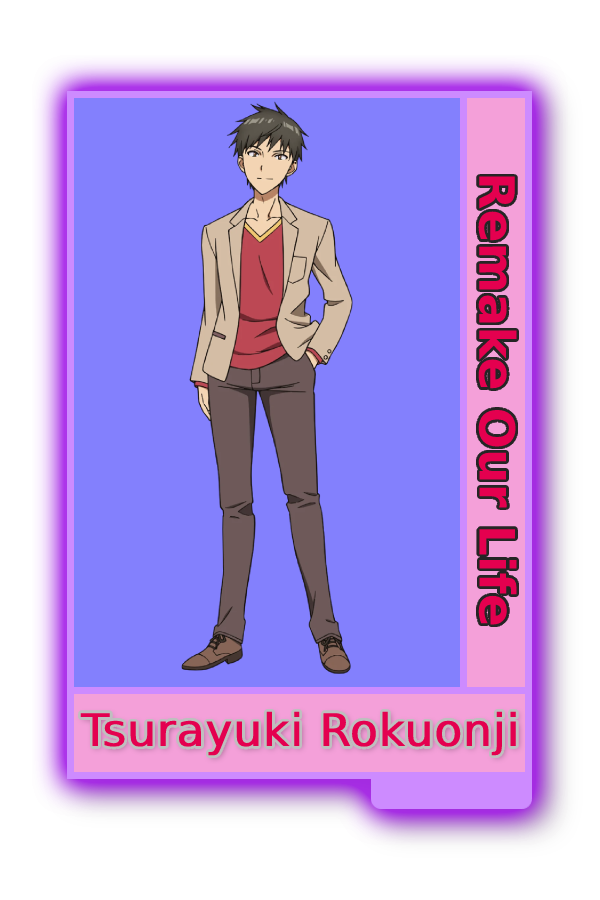
<style>
.page{position:relative;width:600px;height:900px;background:#8380fd}
.page>*{position:absolute;margin:0}
.t1{font:48.8px "MADETOMMY-Bold";color:#e4004f}
.t2{font:45px "CoolveticaRg-Regular";color:#e4004f;font-weight:bold}
</style>
<div class="page">
<p class="t1" style="left:478px;top:176px;width:39px;height:449px;rotate:90deg">Remake Our Life</p>
<p class="t2" style="left:80px;top:711px;width:436px;height:45px">Tsurayuki Rokuonji</p>
</div>
